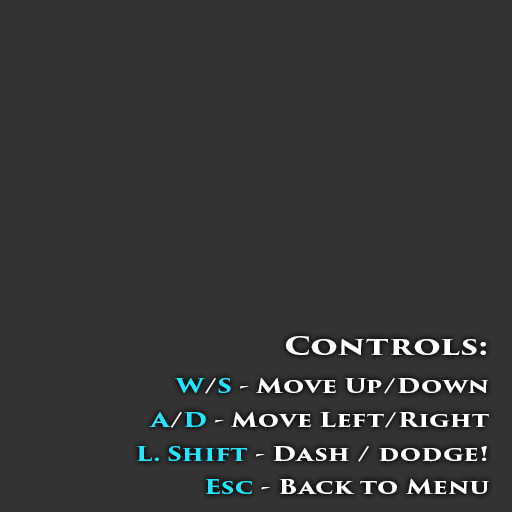
<style>
.page{position:relative;width:512px;height:512px;background:#333333}
.page>*{position:absolute;margin:0}
.t1{font:19.6px "TrajanPro3-Bold";color:#fefefe;scale:1.29 1}
.t2{font:25.2px "TrajanPro3-Bold";color:#ffffff;scale:1.29 1}
.t3{font:19.6px "TrajanPro3-Bold";color:#24e5fc;scale:1.29 1}
.t4{font:19.6px "TrajanPro3-Bold";color:#ffffff;scale:1.29 1}
</style>
<div class="page">
<p class="t1" style="left:137px;top:336px;width:352px;height:158px;text-align:right"><span class="t2">Controls:<br><br></span><span class="t3">W</span><span class="t4">/</span><span class="t3">S </span>- Move Up/Down<br><br><span class="t3">A</span><span class="t4">/</span><span class="t3">D </span>- Move Left/Right<br><br><span class="t3">L. Shift </span><span class="t4">- Dash / dodge!<br><br></span><span class="t3">Esc </span><span class="t4">- Back to Menu</span></p>
</div>
